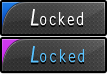
<style>
.page{position:relative;width:107px;height:74px}
.page>*{position:absolute;margin:0}
.t1{font:17.1px "LetterGothicStd";letter-spacing:0.05em;color:#ffffff;scale:0.82 1}
.t2{font:22px "LetterGothicStd";color:#ffffff;font-weight:bold;font-style:italic;scale:0.82 1}
.t3{font:17.1px "LetterGothicStd";letter-spacing:0.075em;color:#5ac3ff;scale:0.82 1}
.t4{font:22px "LetterGothicStd";color:#5ac3ff;font-weight:bold;font-style:italic;scale:0.82 1}
</style>
<div class="page">
<p class="t1" style="left:30px;top:9px;width:53px;height:17px"><span class="t2">L</span>ocked</p>
<p class="t3" style="left:30px;top:46px;width:54px;height:17px"><span class="t4">L</span>ocked</p>
</div>
